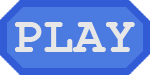
<style>
.page{position:relative;width:150px;height:75px;background:#4b7be1}
.page>*{position:absolute;margin:0}
.t1{font:51.4px "CourierNewPS-BoldMT";color:#e7e7e7}
</style>
<div class="page">
<p class="t1" style="left:15px;top:22px;width:120px;height:30px">PLAY</p>
</div>
